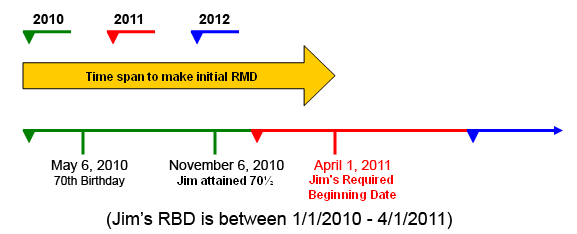
<style>
.page{position:relative;width:577px;height:234px;background:#ffffff}
.page>*{position:absolute;margin:0}
.t1{font:14px "Arial-BoldMT";color:#000000}
.t2{font:14px "ArialMT";color:#000000}
.t3{font:14px "ArialMT";color:#fe0000}
.t4{font:12px "ArialMT";color:#000000}
.t5{font:18px "ArialMT";color:#000000}
</style>
<div class="page">
<p class="t1" style="left:33px;top:14px;width:31px;height:10px">2010</p>
<p class="t1" style="left:114px;top:14px;width:29px;height:10px">2011</p>
<p class="t1" style="left:199px;top:14px;width:31px;height:10px">2012</p>
<p class="t2" style="left:51px;top:160px;width:77px;height:13px">May 6, 2010</p>
<p class="t2" style="left:169px;top:160px;width:115px;height:12px">November 6, 2010</p>
<p class="t3" style="left:314px;top:160px;width:76px;height:13px">April 1, 2011</p>
<p class="t4" style="left:54px;top:176px;width:71px;height:11px">70th Birthday</p>
<p class="t5" style="left:107px;top:212px;width:345px;height:17px">(Jim’s RBD is between 1/1/2010 - 4/1/2011)</p>
</div>
